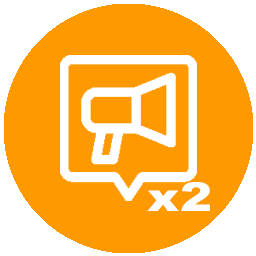
<style>
.page{position:relative;width:256px;height:256px;background:#ff9900}
.page>*{position:absolute;margin:0}
.t1{font:39.8px "Arial-Black";letter-spacing:0.02em;color:#ffffff;scale:1.2 1}
</style>
<div class="page">
<p class="t1" style="left:147px;top:182px;width:63px;height:29px">x2</p>
</div>
